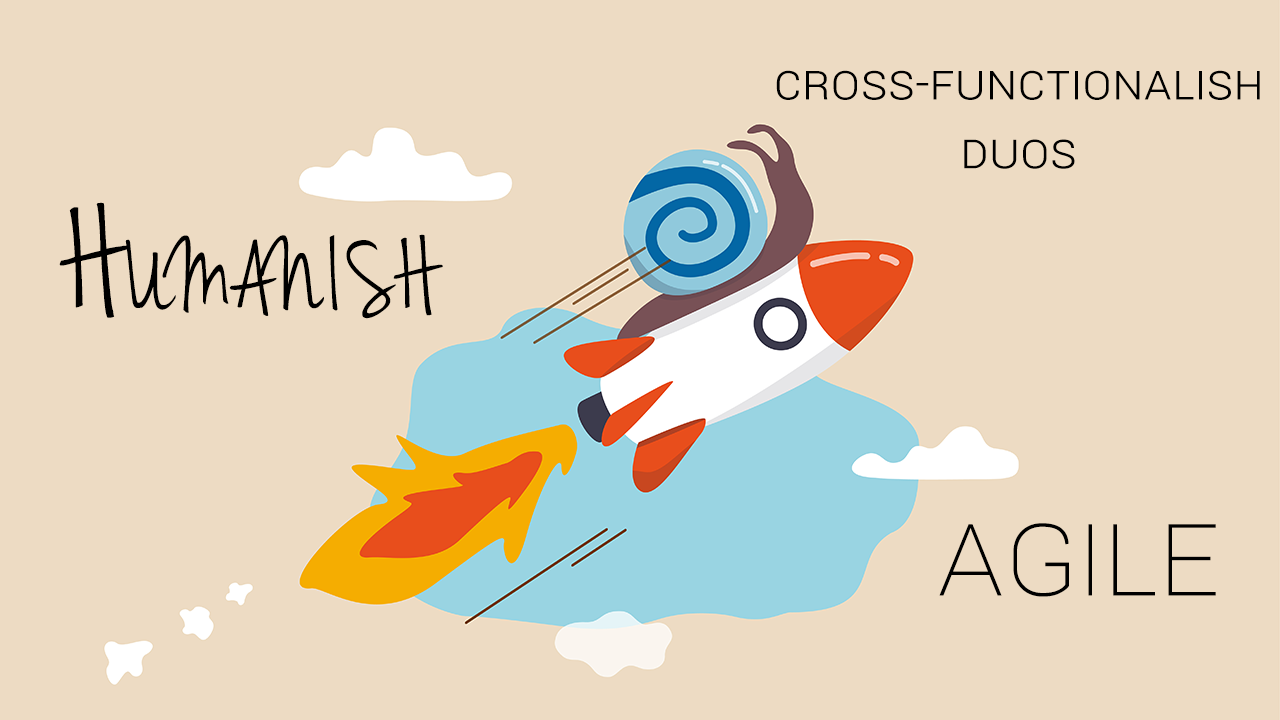
<style>
.page{position:relative;width:1280px;height:720px;background:#eddbc3}
.page>*{position:absolute;margin:0}
.t1{font:50px/68.8px "Roboto-Light";color:#000000;font-variant:small-caps}
.t2{font:150px "JennaSue";color:#000000;font-variant:small-caps}
.t3{font:125px "Roboto-Thin";color:#000000;font-variant:small-caps}
</style>
<div class="page">
<p class="t1" style="left:776px;top:70px;width:484px;height:99px;text-align:center">Cross-Functionalish<br>Duos</p>
<p class="t2" style="left:59px;top:202px;width:384px;height:117px">Humanish</p>
<p class="t3" style="left:939px;top:523px;width:277px;height:74px">Agile</p>
</div>
